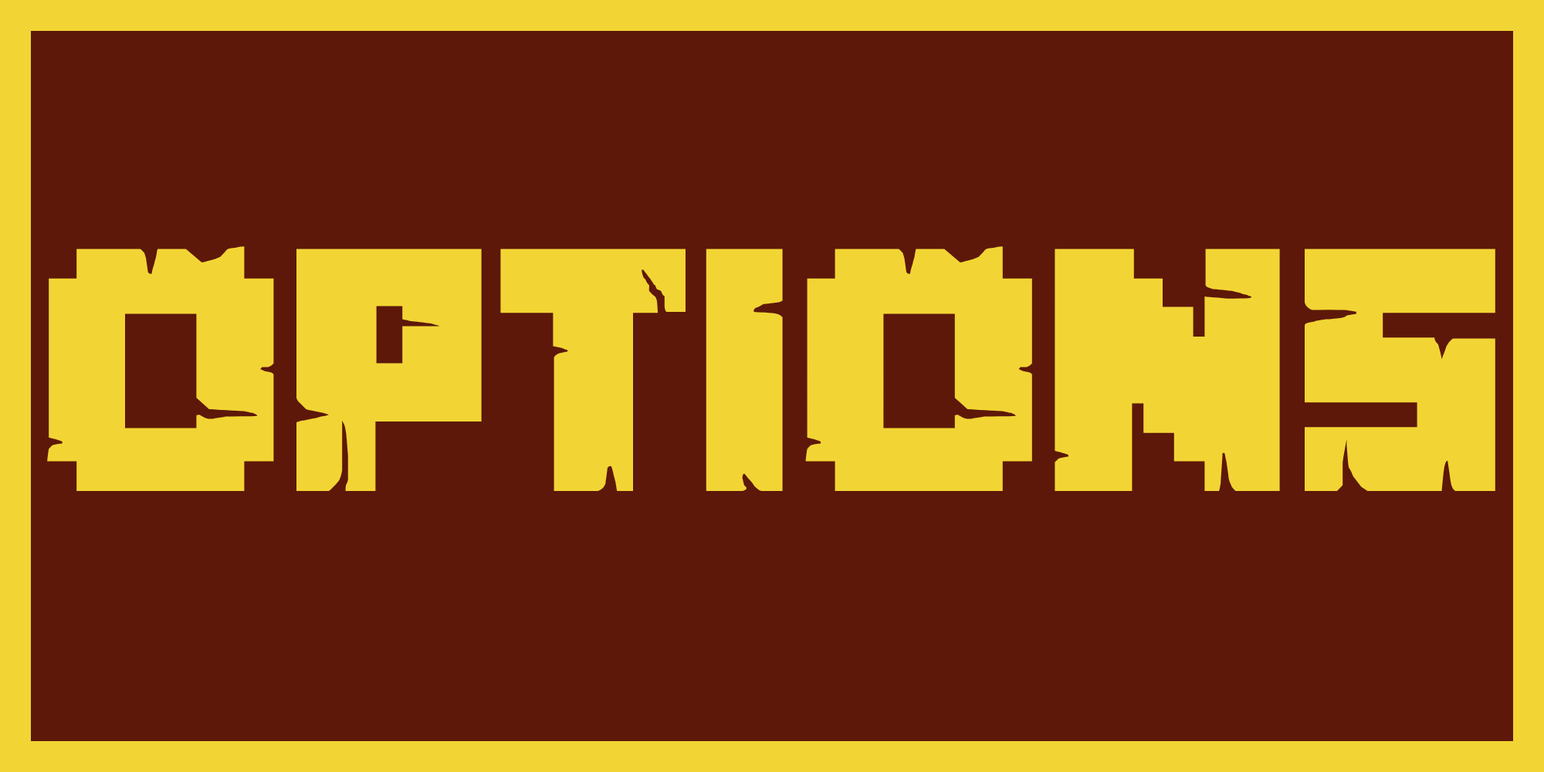
<style>
.page{position:relative;width:1544px;height:772px;background:#5d1809}
.page>*{position:absolute;margin:0}
.t1{font:308.9px "MinecrafterAlt";color:#f2d534}
</style>
<div class="page">
<p class="t1" style="left:47px;top:246px;width:1449px;height:245px">OPTIONS</p>
</div>
